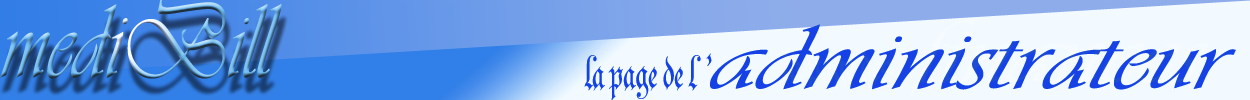
<style>
.page{position:relative;width:1250px;height:100px;background:#f2faff}
.page>*{position:absolute;margin:0}
.t1{font:110.1px "Vivaldii";scale:0.78 1}
.t2{font:96.1px "Vivaldii";color:#1e4ed0;scale:1.27 1}
.t3{font:80.6px "Parchment-Regular";color:#1e4ed0;scale:0.73 1}
</style>
<div class="page">
<p class="t1" style="left:0px;top:0px;width:282px;height:79px">mediBill</p>
<p class="t2" style="left:710px;top:24px;width:526px;height:66px">administrateur</p>
<p class="t3" style="left:584px;top:53px;width:128px;height:48px">la page de l  ’</p>
</div>
